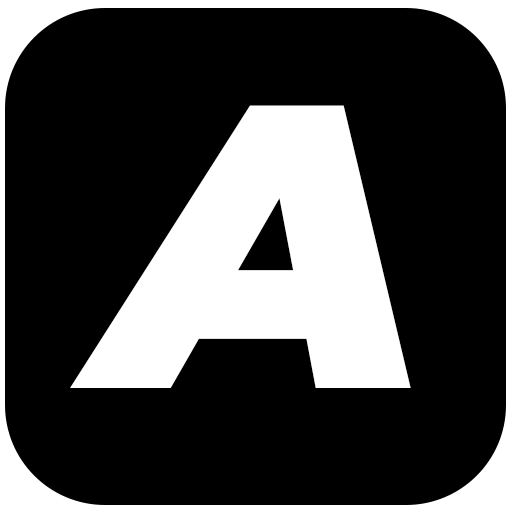
<style>
.page{position:relative;width:512px;height:512px;background:#000000}
.page>*{position:absolute;margin:0}
.t1{font:403.3px "Montserrat-BlackItalic";letter-spacing:-0.02em;color:#ffffff}
</style>
<div class="page">
<p class="t1" style="left:70px;top:105px;width:341px;height:283px">A</p>
</div>
